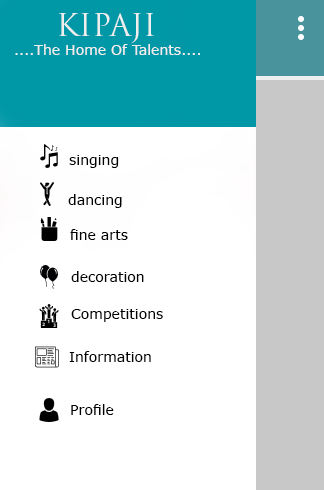
<style>
.page{position:relative;width:324px;height:490px;background:#ffffff}
.page>*{position:absolute;margin:0}
.t1{font:30px "TrajanPro-Regular";color:#efefef}
.t2{font:14px "Verdana";color:#efefef}
.t3{font:14px "Verdana";color:#000000}
</style>
<div class="page">
<p class="t1" style="left:59px;top:13px;width:95px;height:31px">KIPAJI</p>
<p class="t2" style="left:15px;top:44px;width:185px;height:11px">....The Home Of Talents....</p>
<p class="t3" style="left:69px;top:155px;width:50px;height:13px">singing</p>
<p class="t3" style="left:68px;top:194px;width:54px;height:14px">dancing</p>
<p class="t3" style="left:70px;top:229px;width:58px;height:11px">fine arts</p>
<p class="t3" style="left:71px;top:271px;width:73px;height:11px">decoration</p>
<p class="t3" style="left:71px;top:309px;width:92px;height:13px">Competitions</p>
<p class="t3" style="left:69px;top:351px;width:82px;height:11px">Information</p>
<p class="t3" style="left:71px;top:404px;width:43px;height:11px">Profile</p>
</div>
